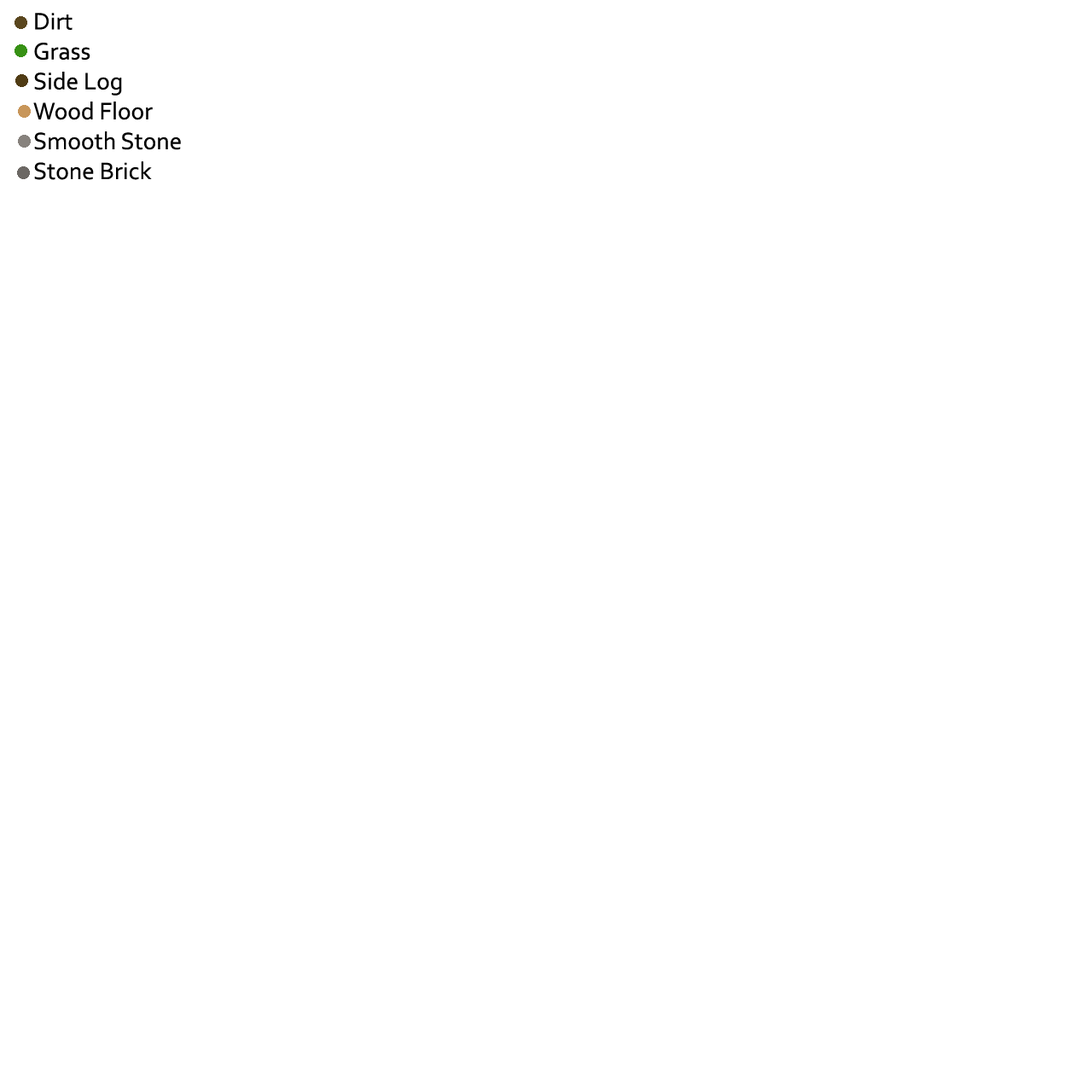
<style>
.page{position:relative;width:1092px;height:1092px;background:#ffffff}
.page>*{position:absolute;margin:0}
.t1{font:25px "Corbel";color:#000000}
</style>
<div class="page">
<p class="t1" style="left:33px;top:13px;width:148px;height:167px">Dirt<br>Grass<br>Side Log<br>Wood Floor<br>Smooth Stone<br>Stone Brick</p>
</div>
